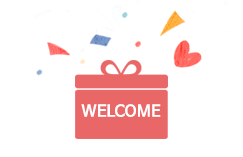
<style>
.page{position:relative;width:243px;height:157px;background:#ffffff}
.page>*{position:absolute;margin:0}
.t1{font:16px "NanumBarunGothicBold";letter-spacing:0.01em;color:#ffffff;text-transform:uppercase}
</style>
<div class="page">
<p class="t1" style="left:81px;top:104px;width:80px;height:13px">welcome</p>
</div>
